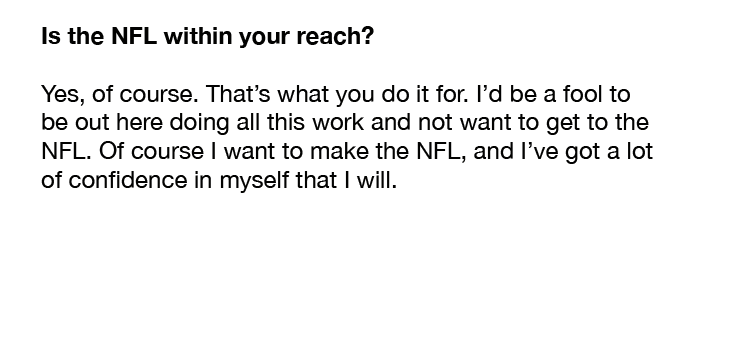
<style>
.page{position:relative;width:753px;height:357px;background:#ffffff}
.page>*{position:absolute;margin:0}
.t1{font:24px "HelveticaNeue";color:#020201}
.t2{font:24px "HelveticaNeue-Bold";color:#020201}
</style>
<div class="page">
<p class="t1" style="left:41px;top:26px;width:612px;height:167px"><span class="t2">Is the NFL within your reach?<br><br></span>Yes, of course. That’s what you do it for. I’d be a fool to <br>be out here doing all this work and not want to get to the <br>NFL. Of course I want to make the NFL, and I’ve got a lot <br>of confidence in myself that I will.</p>
</div>
